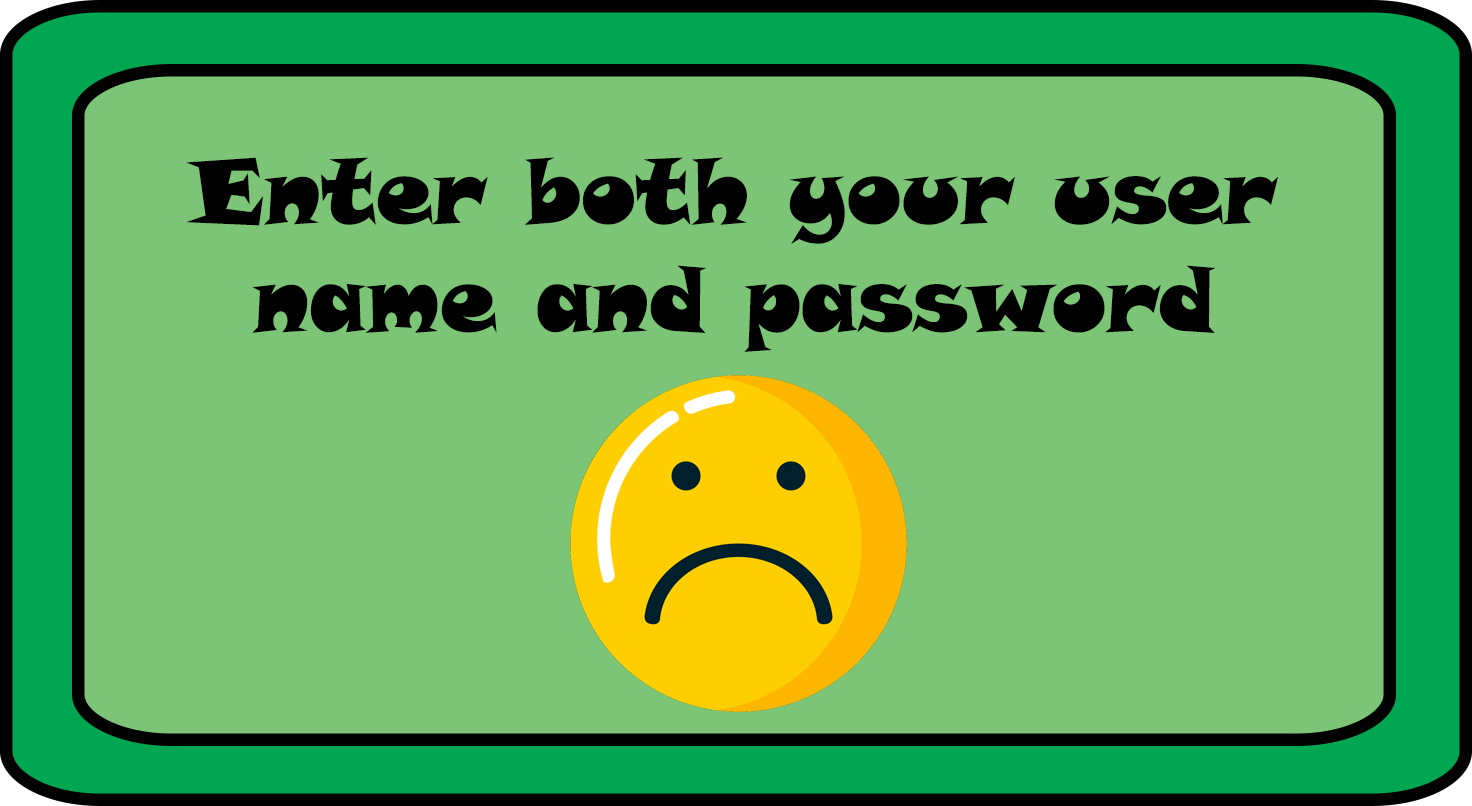
<style>
.page{position:relative;width:1472px;height:806px;background:#7cc576}
.page>*{position:absolute;margin:0}
.t1{font:90px "SnapITC-Regular";color:#000000}
</style>
<div class="page">
<p class="t1" style="left:186px;top:157px;width:1092px;height:195px;text-align:center">Enter both your user name and password</p>
</div>
